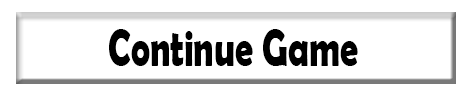
<style>
.page{position:relative;width:470px;height:98px;background:#ffffff}
.page>*{position:absolute;margin:0}
.t1{font:52.3px "BerlinSansFBDemi-Bold";color:#000000;scale:0.69 1}
</style>
<div class="page">
<p class="t1" style="left:109px;top:29px;width:249px;height:37px">Continue Game</p>
</div>
